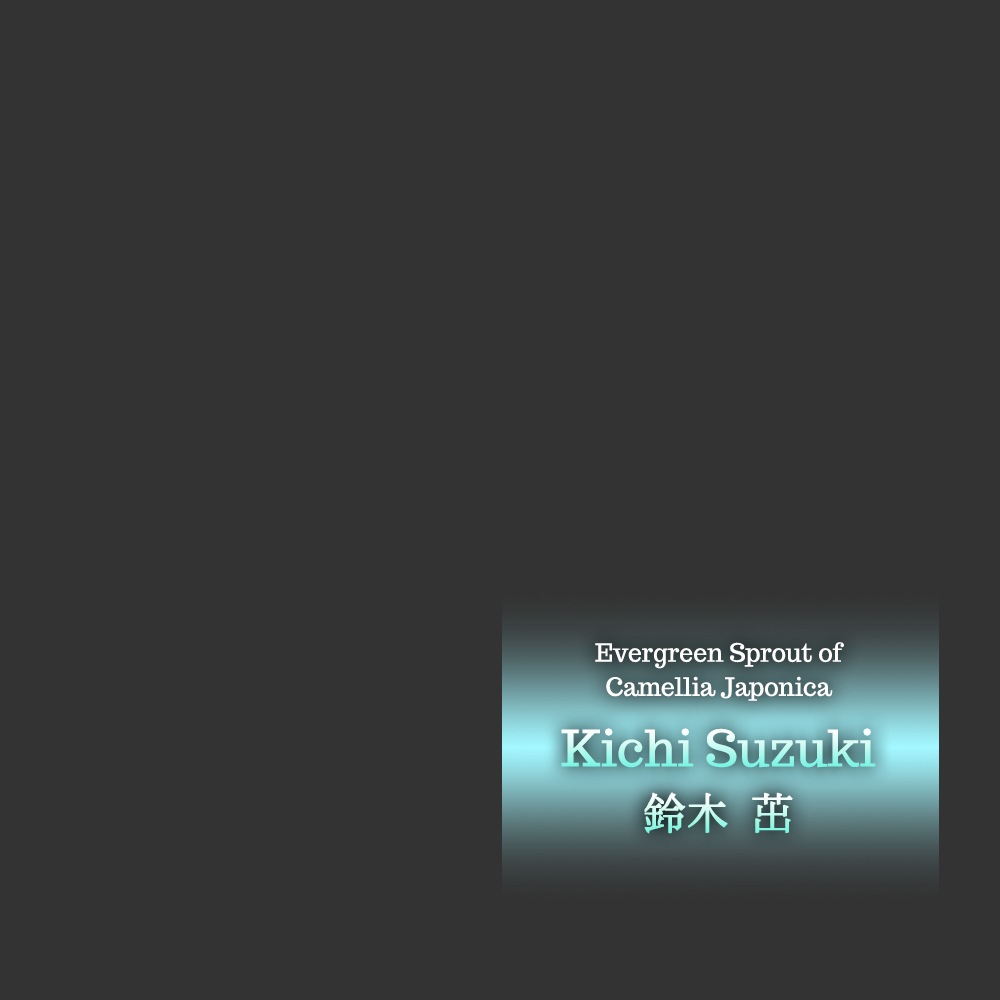
<style>
.page{position:relative;width:1000px;height:1000px;background:#333333}
.page>*{position:absolute;margin:0}
.t1{font:25px "Trocchi";color:#ffffff}
.t2{font:50px "Trocchi"}
.t3{font:41.7px "XANO-mincho-U32";font-weight:bold}
</style>
<div class="page">
<p class="t1" style="left:595px;top:642px;width:249px;height:59px;text-align:center">Evergreen Sprout of<br>Camellia Japonica</p>
<p class="t2" style="left:561px;top:728px;width:315px;height:40px">Kichi Suzuki</p>
<p class="t3" style="left:644px;top:792px;width:149px;height:42px">鈴木 茁</p>
</div>
